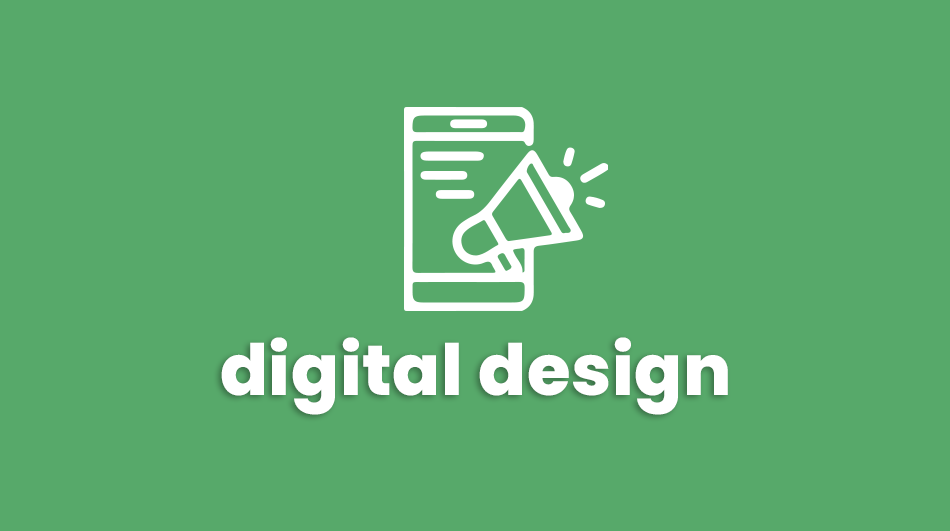
<style>
.page{position:relative;width:950px;height:531px;background:#57a96a}
.page>*{position:absolute;margin:0}
.t1{font:70.7px "Poppins-ExtraBold";letter-spacing:0.01em;color:#ffffff}
</style>
<div class="page">
<p class="t1" style="left:221px;top:337px;width:507px;height:78px">digital design</p>
</div>
